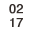
<style>
.page{position:relative;width:32px;height:32px;background:#ffffff}
.page>*{position:absolute;margin:0}
.t1{font:12.5px "Helvetica";color:#362e2b;font-weight:bold}
</style>
<div class="page">
<p class="t1" style="left:9px;top:4px;width:14px;height:10px">02</p>
<p class="t1" style="left:10px;top:18px;width:13px;height:9px">17</p>
</div>
